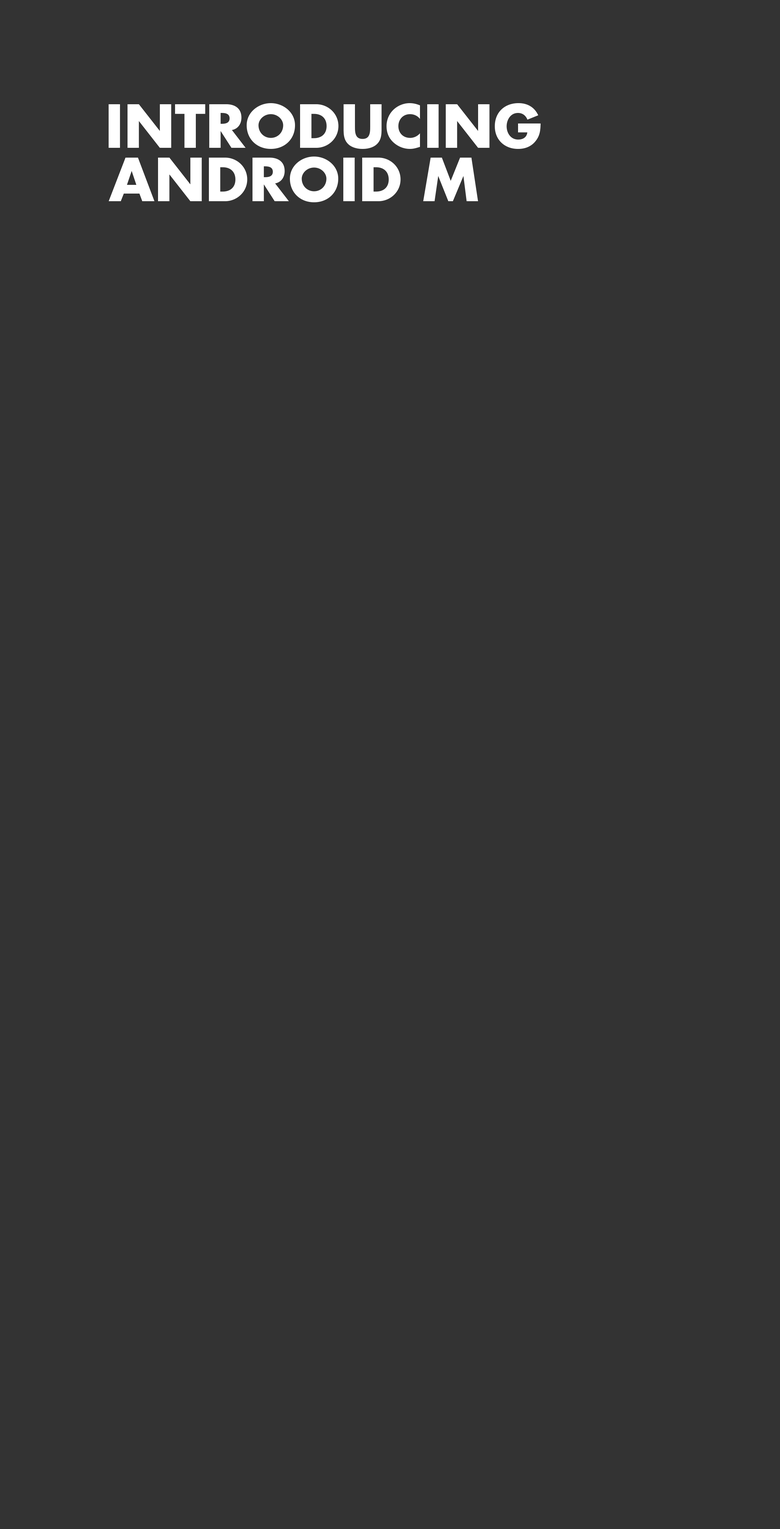
<style>
.page{position:relative;width:780px;height:1529px;background:#333333}
.page>*{position:absolute;margin:0}
.t1{font:57.9px "FuturaStd-Bold";color:#ffffff}
</style>
<div class="page">
<p class="t1" style="left:109px;top:103px;width:431px;height:46px">INTRODUCING</p>
<p class="t1" style="left:109px;top:157px;width:369px;height:45px">ANDROID M</p>
</div>
